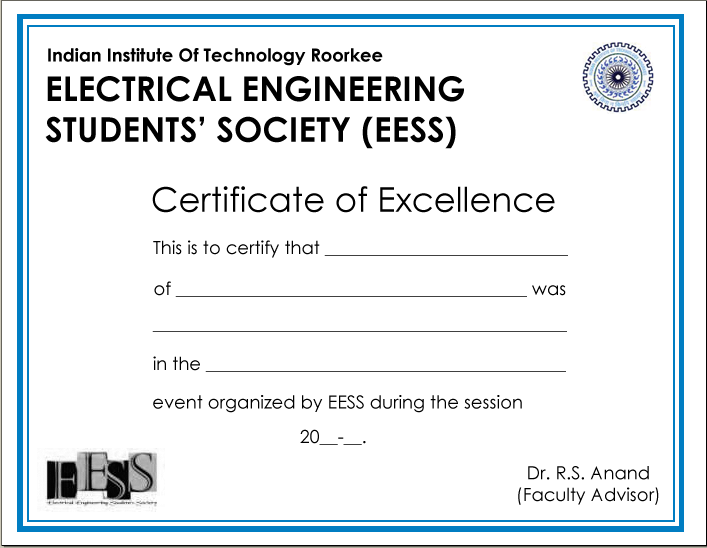
<style>
.page{position:relative;width:707px;height:548px;background:#ffffff}
.page>*{position:absolute;margin:0}
.t1{font:18px "CenturyGothic-Bold";color:#000000}
.t2{font:34px "CenturyGothic-Bold";color:#000000}
.t3{font:34px "CenturyGothic";color:#000000}
.t4{font:18px "CenturyGothic";color:#000000}
.t5{font:18px "CenturyGothic"}
</style>
<div class="page">
<p class="t1" style="left:48px;top:48px;width:335px;height:18px"><span class="t2"><br></span>Indian Institute Of Technology Roorkee</p>
<p class="t2" style="left:45px;top:76px;width:419px;height:73px">ELECTRICAL ENGINEERING<br>STUDENTS’ SOCIETY (EESS)</p>
<p class="t3" style="left:152px;top:186px;width:403px;height:27px">Certificate of Excellence</p>
<p class="t4" style="left:153px;top:240px;width:415px;height:18px">This is to certify that ___________________________</p>
<p class="t4" style="left:154px;top:281px;width:412px;height:16px">of _______________________________________ was</p>
<p class="t5" style="left:152px;top:331px;width:415px;height:1px">______________________________________________</p>
<p class="t4" style="left:153px;top:356px;width:413px;height:16px">in the ________________________________________</p>
<p class="t4" style="left:153px;top:395px;width:369px;height:18px">event organized by EESS during the session</p>
<p class="t4" style="left:300px;top:429px;width:66px;height:16px">20__-__.</p>
<p class="t4" style="left:518px;top:466px;width:141px;height:39px;text-align:center">Dr. R.S. Anand<br>(Faculty Advisor)</p>
</div>
